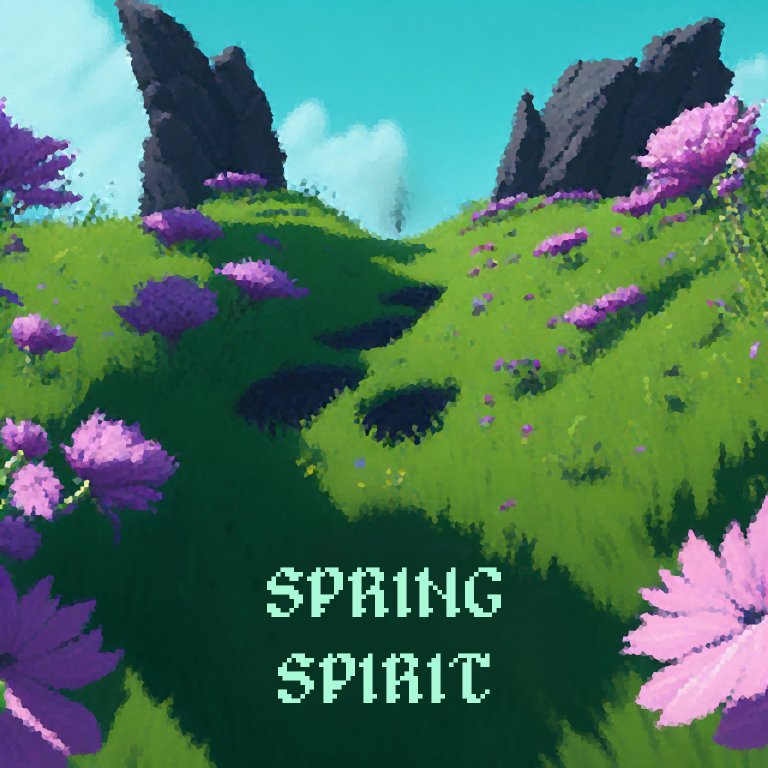
<style>
.page{position:relative;width:768px;height:768px}
.page>*{position:absolute;margin:0}
.t1{font:72px "Alagard";color:#a9fad7;font-variant:small-caps}
</style>
<div class="page">
<p class="t1" style="left:267px;top:567px;width:234px;height:136px;text-align:center">SPRING<br>SPIRIT</p>
</div>
